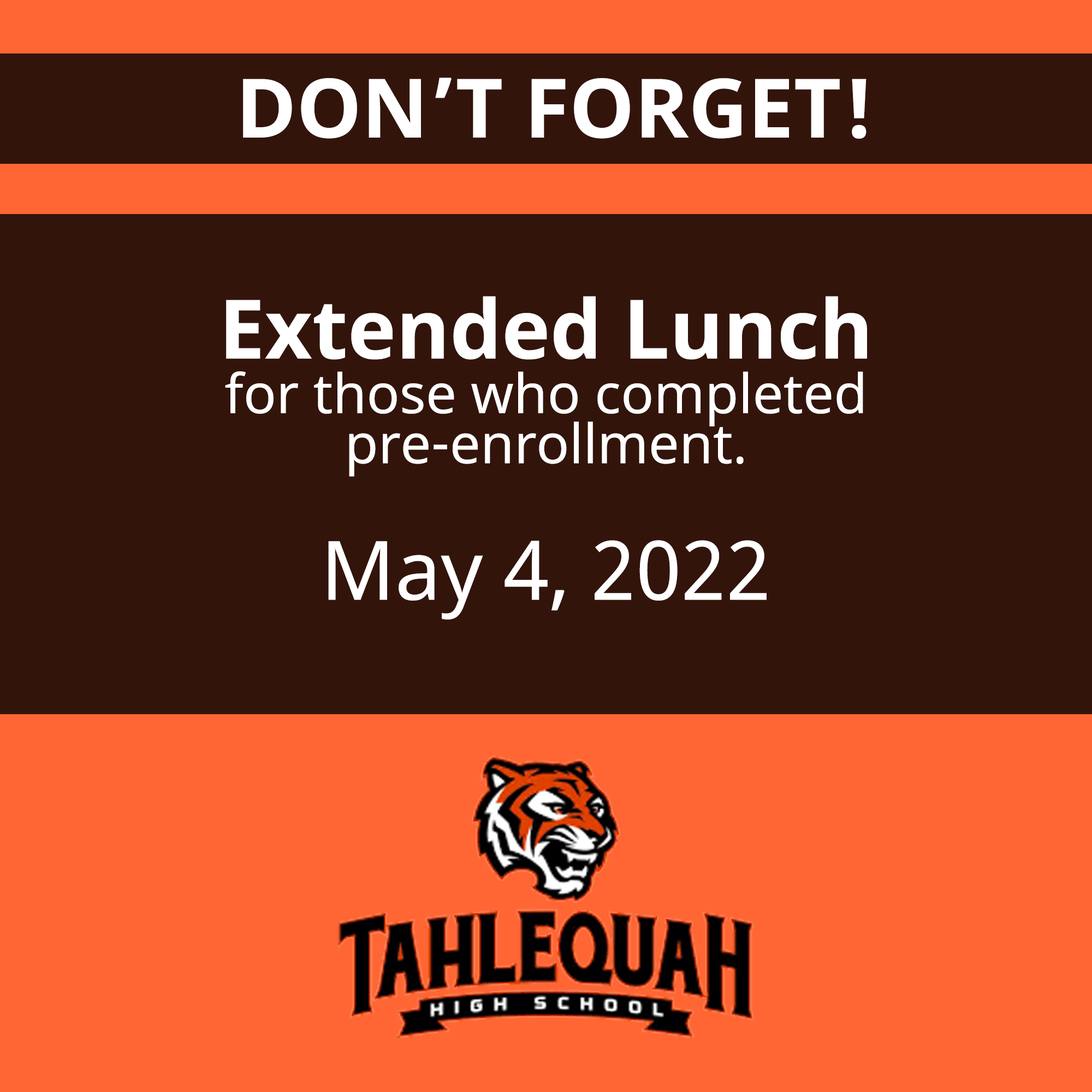
<style>
.page{position:relative;width:1092px;height:1092px;background:#33140a}
.page>*{position:absolute;margin:0}
.t1{font:81.9px "NotoSans-Bold";color:#ffffff}
.t2{font:54.6px/54.6px "NotoSans";color:#ffffff}
.t3{font:81.9px/50px "NotoSans-Bold";color:#ffffff}
.t4{font:54.6px/50px "NotoSans";color:#ffffff}
.t5{font:81.9px/136.5px "NotoSans";color:#ffffff}
</style>
<div class="page">
<p class="t1" style="left:243px;top:78px;width:623px;height:61px">DON’T FORGET!</p>
<p class="t2" style="left:225px;top:296px;width:642px;height:324px;text-align:center"><span class="t3">Extended Lunch<br></span>for those who completed <span class="t4">pre-enrollment.<br></span><span class="t5">May 4, 2022</span></p>
</div>
